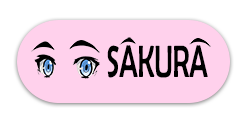
<style>
.page{position:relative;width:242px;height:129px;background:#ffd1ec}
.page>*{position:absolute;margin:0}
.t1{font:45.3px "BerlinSansFB-Reg";color:#000000;scale:0.62 1}
</style>
<div class="page">
<p class="t1" style="left:107px;top:45px;width:101px;height:33px">SAKURA</p>
</div>
